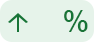
<style>
.page{position:relative;width:94px;height:42px;background:#e6f3ea}
.page>*{position:absolute;margin:0}
.t1{font:29.5px "ArialMT";letter-spacing:0.03em;color:#187437}
</style>
<div class="page">
<p class="t1" style="left:64px;top:10px;width:24px;height:22px">%</p>
</div>
